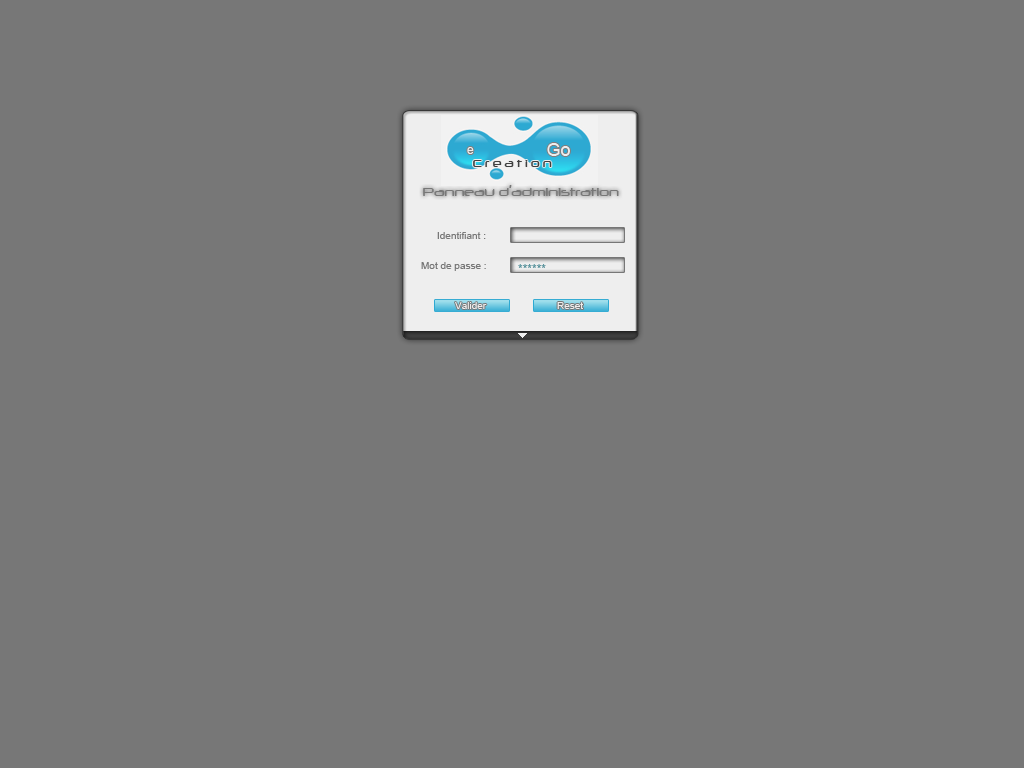
<style>
.page{position:relative;width:1024px;height:768px;background:#777777}
.page>*{position:absolute;margin:0}
.t1{font:12px "Neuropol";color:#404040}
.t2{font:14px "Neuropol";color:#777777}
.t3{font:10px "ArialMT";color:#777777}
.t4{font:12px "ArialMT";color:#5c949d}
.t5{font:10px "ArialMT";color:#eeeeee}
</style>
<div class="page">
<p class="t1" style="left:473px;top:160px;width:79px;height:7px">C r e a t i o n</p>
<p class="t2" style="left:423px;top:185px;width:196px;height:11px">Panneau d’administration</p>
<p class="t3" style="left:437px;top:232px;width:49px;height:7px">Identifiant :</p>
<p class="t3" style="left:421px;top:262px;width:65px;height:9px">Mot de passe :</p>
<p class="t4" style="left:518px;top:264px;width:28px;height:4px">******</p>
<p class="t5" style="left:455px;top:302px;width:32px;height:7px">Valider</p>
<p class="t5" style="left:557px;top:302px;width:26px;height:7px">Reset</p>
</div>
